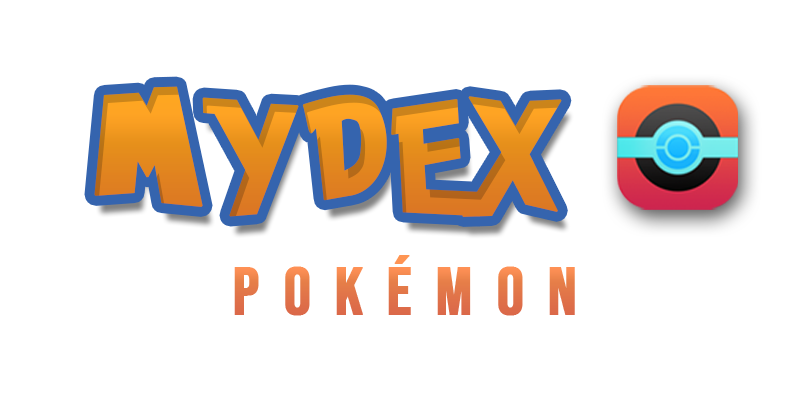
<style>
.page{position:relative;width:808px;height:395px;background:#ffffff}
.page>*{position:absolute;margin:0}
.t1{font:138px "PokemonSolidNormal";letter-spacing:0.12em;font-weight:bold}
.t2{font:111px "PokemonSolidNormal";letter-spacing:0.12em;font-weight:bold}
.t3{font:116px "PokemonSolidNormal";letter-spacing:0.12em;font-weight:bold}
.t4{font:107px "PokemonSolidNormal";letter-spacing:0.12em;font-weight:bold}
.t5{font:113px "PokemonSolidNormal";letter-spacing:0.12em;font-weight:bold}
.t6{font:67px "BebasNeue-Regular";letter-spacing:0.34em;color:#e37949;font-weight:bold}
</style>
<div class="page">
<p class="t1" style="left:94px;top:86px;width:468px;height:131px">M<span class="t2">Y</span><span class="t3">D</span><span class="t4">E</span><span class="t5">X</span></p>
<p class="t6" style="left:234px;top:255px;width:341px;height:61px">POKéMON</p>
</div>
